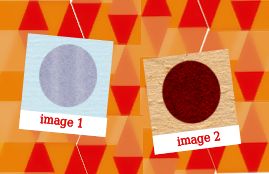
<style>
.page{position:relative;width:269px;height:174px}
.page>*{position:absolute;margin:0}
.t1{font:12px "DejaVuSerifCondensed";color:#de0808}
</style>
<div class="page">
<p class="t1" style="left:40px;top:114px;width:42px;height:15px;rotate:6deg">image 1</p>
<p class="t1" style="left:40px;top:114px;width:42px;height:15px;rotate:6deg">image 1</p>
<p class="t1" style="left:177px;top:131px;width:44px;height:16px;rotate:-8deg">image 2</p>
<p class="t1" style="left:177px;top:131px;width:44px;height:16px;rotate:-8deg">image 2</p>
</div>
